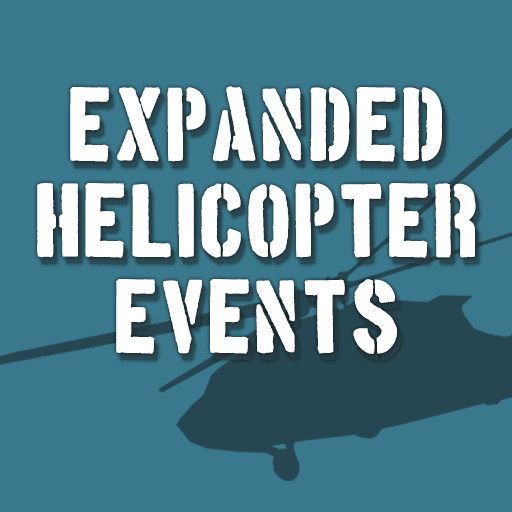
<style>
.page{position:relative;width:512px;height:512px;background:#3a798d}
.page>*{position:absolute;margin:0}
.t1{font:80px "BostonTraffic";color:#ffffff;font-weight:bold}
</style>
<div class="page">
<p class="t1" style="left:37px;top:86px;width:439px;height:268px;text-align:center">EXPANDED<br>HELICOPTER<br>EVENTS</p>
<p class="t1" style="left:41px;top:93px;width:439px;height:268px;text-align:center;opacity:0.79">EXPANDED<br>HELICOPTER<br>EVENTS</p>
</div>
